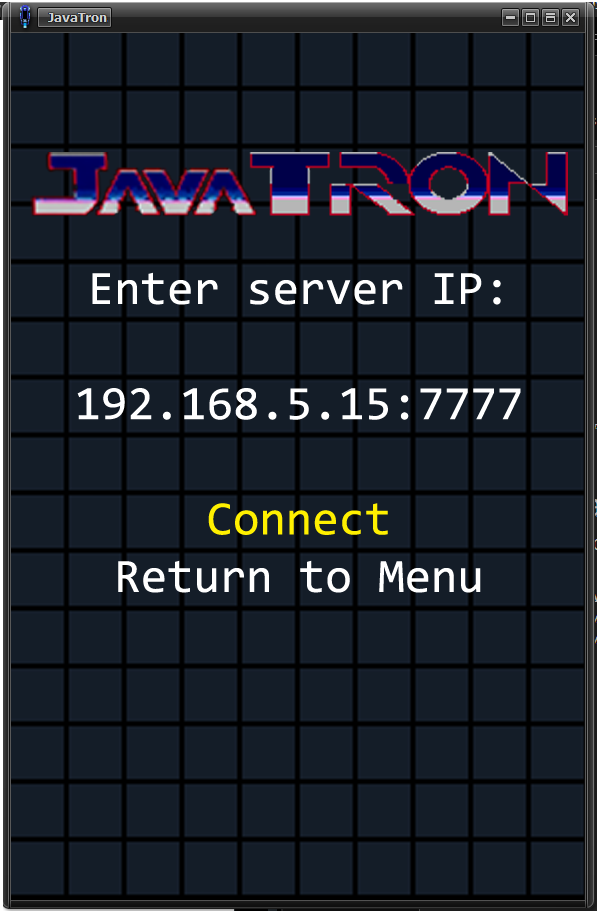
<style>
.page{position:relative;width:600px;height:919px;background:#141d28}
.page>*{position:absolute;margin:0}
.t1{font:48px "Consolas";color:#ffffff}
.t2{font:48px "Consolas";color:#fff000}
</style>
<div class="page">
<p class="t1" style="left:77px;top:272px;width:444px;height:321px;text-align:center">Enter server IP:<br><br>192.168.5.15:7777<br><br><span class="t2">Connect<br></span>Return to Menu</p>
</div>
